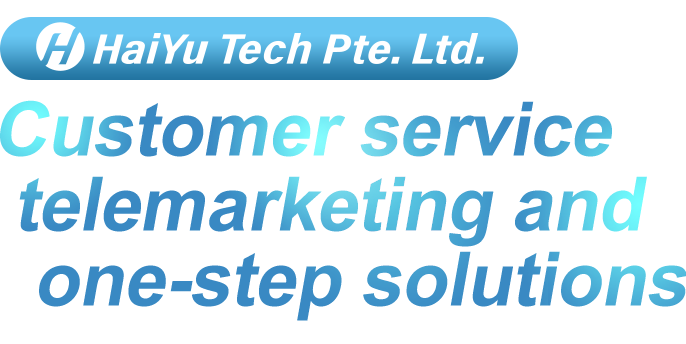
<style>
.page{position:relative;width:686px;height:344px;background:#ffffff}
.page>*{position:absolute;margin:0}
.t1{font:75px/75px "Arial-BoldMT";letter-spacing:-0.01em;font-style:italic}
</style>
<div class="page">
<p class="t1" style="left:0px;top:100px;width:687px;height:221px">Customer service<br> telemarketing and<br>  one-step solutions</p>
</div>
